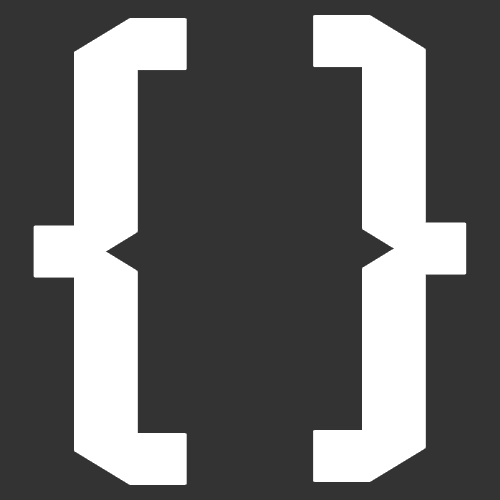
<style>
.page{position:relative;width:500px;height:500px;background:#333333}
.page>*{position:absolute;margin:0}
.t1{font:500px "Quantico-Bold";letter-spacing:-0.025em;color:#ffffff;scale:0.95 1}
</style>
<div class="page">
<p class="t1" style="left:314px;top:16px;width:152px;height:465px">}</p>
<p class="t1" style="left:34px;top:19px;width:152px;height:465px">{</p>
</div>
